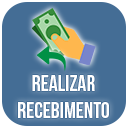
<style>
.page{position:relative;width:128px;height:128px;background:#446d95}
.page>*{position:absolute;margin:0}
.t1{font:22px "BebasNeue";color:#ffffff}
</style>
<div class="page">
<p class="t1" style="left:18px;top:75px;width:91px;height:43px;text-align:center">Realizar Recebimento</p>
</div>
